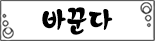
<style>
.page{position:relative;width:155px;height:41px;background:#ffffff}
.page>*{position:absolute;margin:0}
.t1{font:29.7px "KoreanKIES-R";color:#000000;font-weight:bold;scale:0.91 1}
</style>
<div class="page">
<p class="t1" style="left:42px;top:7px;width:71px;height:28px">바꾼다</p>
</div>
